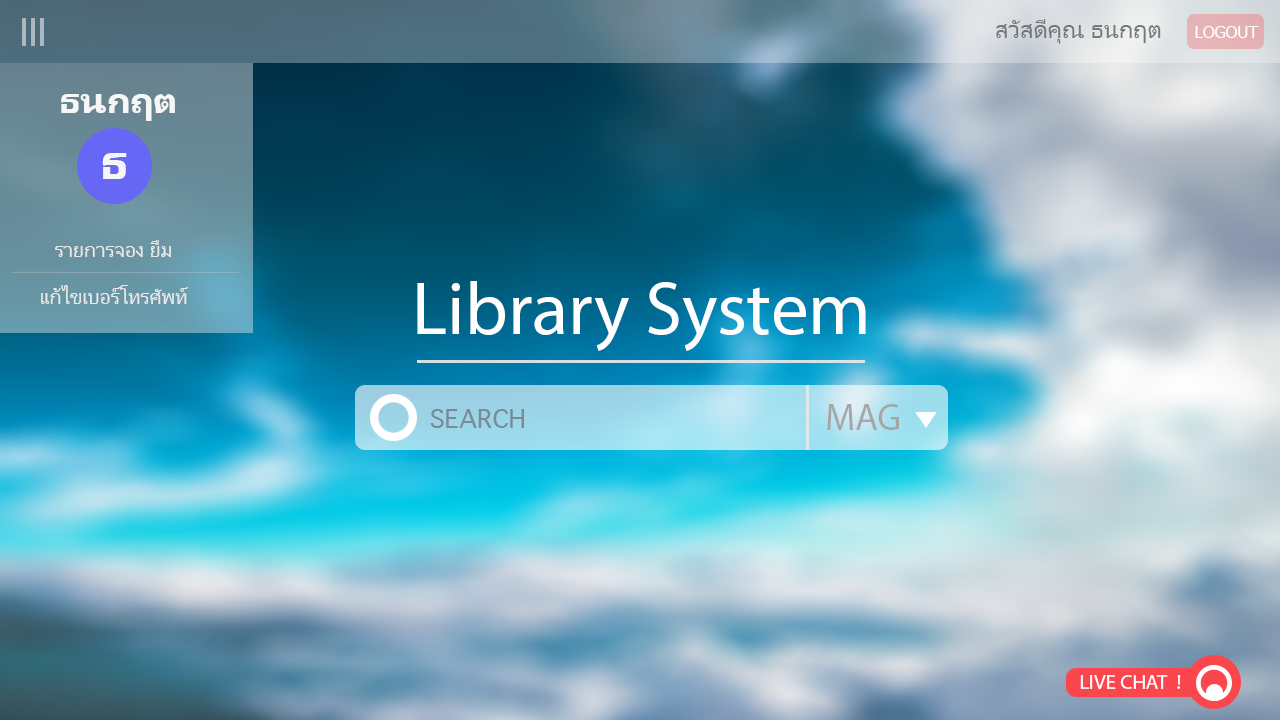
<style>
.page{position:relative;width:1280px;height:720px}
.page>*{position:absolute;margin:0}
.t1{font:25px "Leelawadee";color:#646464}
.t2{font:16.7px "Tahoma";color:#ffffff}
.t3{font:37.5px "Leelawadee-Bold";color:#fefefe}
.t4{font:50px "Leelawadee-Bold";color:#fefefe}
.t5{font:20.8px "Leelawadee";color:#e7e7e7}
.t6{font:75px "MyriadPro-Regular";color:#ffffff}
.t7{font:25px "Thonburi";color:#778d94}
.t8{font:37.5px "MyriadPro-Regular";color:#a7a6a6}
.t9{font:20.8px "MyriadPro-Regular";color:#ffffff}
</style>
<div class="page">
<p class="t1" style="left:996px;top:19px;width:165px;height:25px;opacity:0.88">สวัสดีคุณ ธนกฤต</p>
<p class="t2" style="left:1195px;top:26px;width:64px;height:12px">LOGOUT</p>
<p class="t3" style="left:61px;top:94px;width:114px;height:27px">ธนกฤต</p>
<p class="t4" style="left:102px;top:153px;width:25px;height:26px">ธ</p>
<p class="t5" style="left:55px;top:240px;width:116px;height:17px">รายการจอง ยืม</p>
<p class="t6" style="left:417px;top:281px;width:449px;height:70px">Library System</p>
<p class="t5" style="left:41px;top:285px;width:147px;height:19px">แก้ไขเบอร์โทรศัพท์</p>
<p class="t7" style="left:430px;top:409px;width:94px;height:19px">SEARCH</p>
<p class="t8" style="left:827px;top:404px;width:72px;height:26px">MAG</p>
<p class="t9" style="left:1080px;top:675px;width:101px;height:14px">LIVE CHAT  !</p>
</div>
